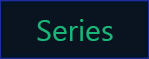
<style>
.page{position:relative;width:149px;height:59px;background:#0a1421}
.page>*{position:absolute;margin:0}
.t1{font:30px "SegoeUISymbol";color:#19b579}
</style>
<div class="page">
<p class="t1" style="left:37px;top:19px;width:76px;height:22px">Series</p>
</div>
